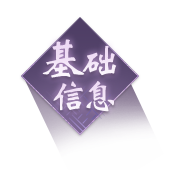
<style>
.page{position:relative;width:170px;height:170px;background:#ffffff}
.page>*{position:absolute;margin:0}
.t1{font:48px "HYh1gj";letter-spacing:-0.1em;color:#eedaf5}
.t2{font:40px "HYh1gj";letter-spacing:-0.1em;color:#eedaf5}
.t3{font:36px "HYh1gj";letter-spacing:-0.17em;color:#eedaf5}
</style>
<div class="page">
<p class="t1" style="left:42px;top:39px;width:75px;height:39px">基<span class="t2">础</span></p>
<p class="t3" style="left:53px;top:81px;width:61px;height:31px">信息</p>
</div>
